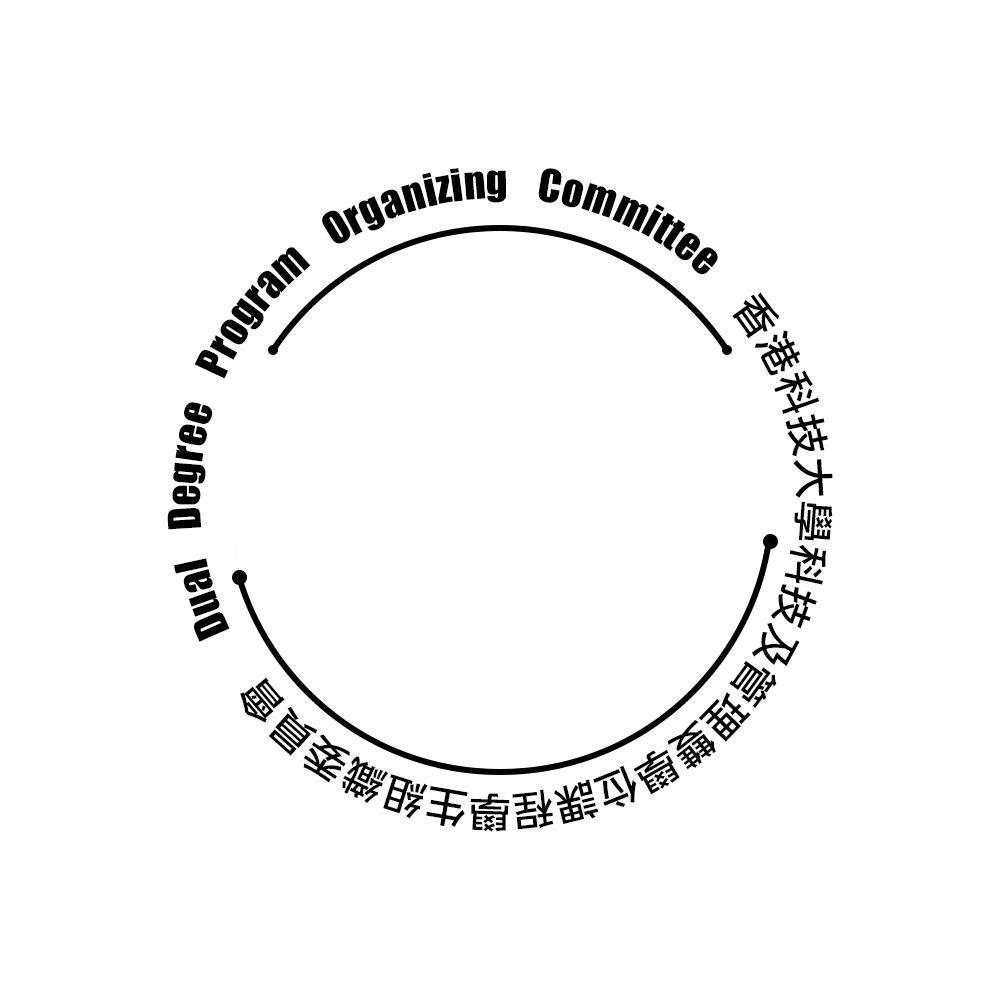
<style>
.page{position:relative;width:1000px;height:1000px;background:#ffffff}
.page>*{position:absolute;margin:0}
.t1{font:41.7px "Impact";color:#000000}
.t2{font:41.7px "LiGothicMed";color:#000000}
</style>
<div class="page">
<p class="t1" style="left:167px;top:168px;width:666px;height:664px;text-align:justify"><span class="t2"> </span>Dual Degree Program Organizing Committee <span class="t2">香港科技大學科技及管理雙學位課程學生組織委員會</span></p>
</div>
